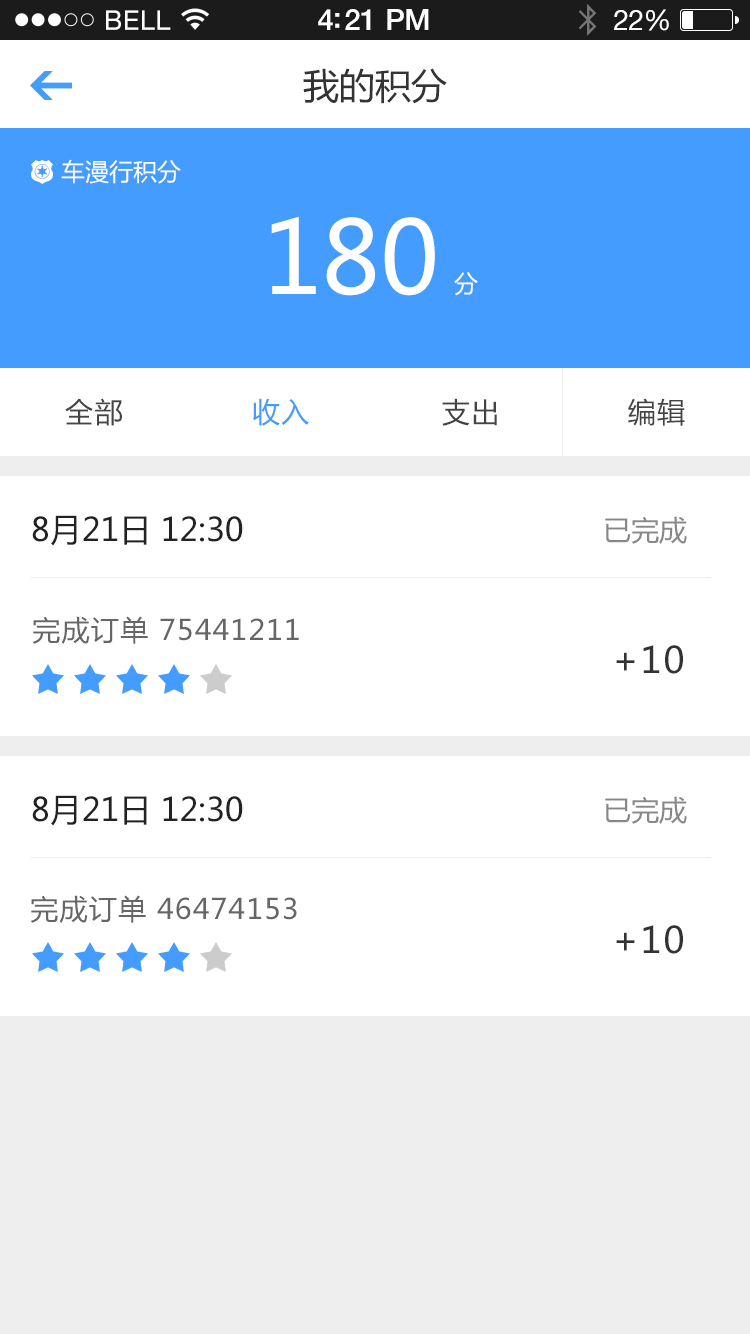
<style>
.page{position:relative;width:750px;height:1334px;background:#ffffff}
.page>*{position:absolute;margin:0}
.t1{font:36px "MicrosoftYaHei";color:#333333}
.t2{font:24px "MicrosoftYaHei";color:#ffffff}
.t3{font:100px "MicrosoftYaHei";color:#ffffff}
.t4{font:28px "MicrosoftYaHei";letter-spacing:0.05em;color:#444444}
.t5{font:28px "MicrosoftYaHei";letter-spacing:0.05em;color:#449cff}
.t6{font:32px "MicrosoftYaHei";color:#222222}
.t7{font:28px "MicrosoftYaHei";color:#888888}
.t8{font:28px "MicrosoftYaHei";letter-spacing:0.05em;color:#666666}
.t9{font:36px "MicrosoftYaHei";letter-spacing:0.05em;color:#333333}
</style>
<div class="page">
<p class="t1" style="left:303px;top:68px;width:144px;height:36px">我的积分</p>
<p class="t2" style="left:61px;top:159px;width:120px;height:25px">车漫行积分</p>
<p class="t3" style="left:271px;top:216px;width:164px;height:80px">180</p>
<p class="t2" style="left:454px;top:272px;width:24px;height:24px">分</p>
<p class="t4" style="left:65px;top:398px;width:57px;height:28px">全部</p>
<p class="t5" style="left:253px;top:398px;width:56px;height:28px">收入</p>
<p class="t4" style="left:442px;top:398px;width:55px;height:28px">支出</p>
<p class="t4" style="left:628px;top:398px;width:57px;height:28px">编辑</p>
<p class="t6" style="left:32px;top:515px;width:211px;height:31px">8月21日 12:30</p>
<p class="t7" style="left:605px;top:516px;width:82px;height:28px">已完成</p>
<p class="t8" style="left:32px;top:616px;width:267px;height:28px">完成订单 75441211</p>
<p class="t9" style="left:616px;top:645px;width:67px;height:29px">+10</p>
<p class="t6" style="left:32px;top:795px;width:211px;height:31px">8月21日 12:30</p>
<p class="t7" style="left:605px;top:796px;width:82px;height:28px">已完成</p>
<p class="t8" style="left:30px;top:895px;width:267px;height:28px">完成订单 46474153</p>
<p class="t9" style="left:616px;top:925px;width:67px;height:29px">+10</p>
</div>
